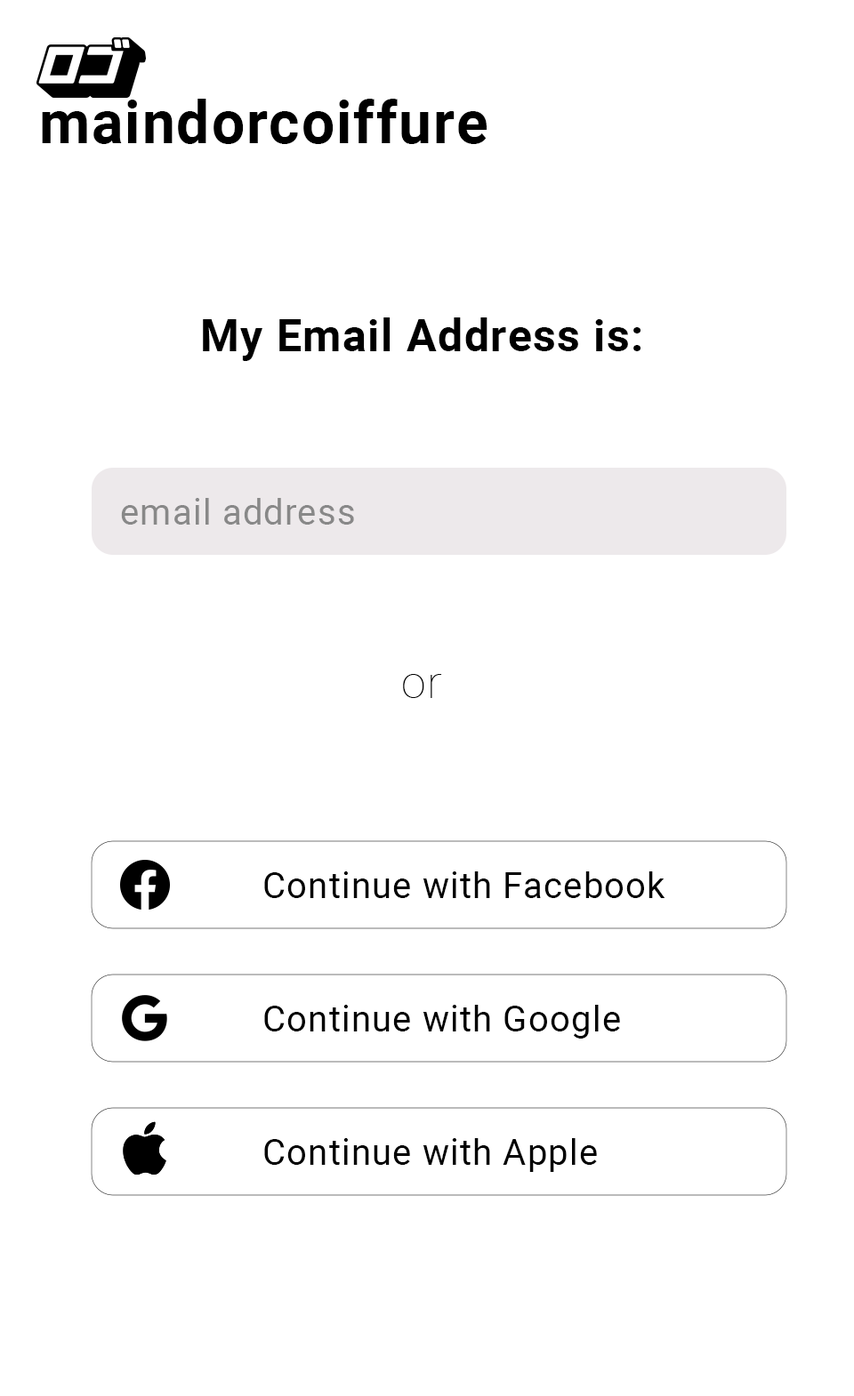
<style>
.page{position:relative;width:854px;height:1396px;background:#ffffff}
.page>*{position:absolute;margin:0}
.t1{font:58.6px "Roboto-Bold";letter-spacing:0.03em;color:#000000}
.t2{font:44.5px "Roboto-Bold";letter-spacing:0.03em;color:#000000}
.t3{font:35.6px "Roboto-Regular";letter-spacing:0.03em;color:#888888}
.t4{font:44.5px "Roboto-Thin";letter-spacing:0.03em;color:#000000}
.t5{font:35.6px "Roboto-Regular";letter-spacing:0.03em;color:#000000}
</style>
<div class="page">
<p class="t1" style="left:42px;top:99px;width:445px;height:45px">maindorcoiffure</p>
<p class="t2" style="left:203px;top:318px;width:437px;height:43px">My Email Address is:</p>
<p class="t3" style="left:121px;top:498px;width:233px;height:27px">email address</p>
<p class="t4" style="left:403px;top:674px;width:39px;height:24px">or</p>
<p class="t5" style="left:264px;top:872px;width:401px;height:26px">Continue with Facebook</p>
<p class="t5" style="left:264px;top:1005px;width:356px;height:34px">Continue with Google</p>
<p class="t5" style="left:264px;top:1139px;width:333px;height:33px">Continue with Apple</p>
</div>
